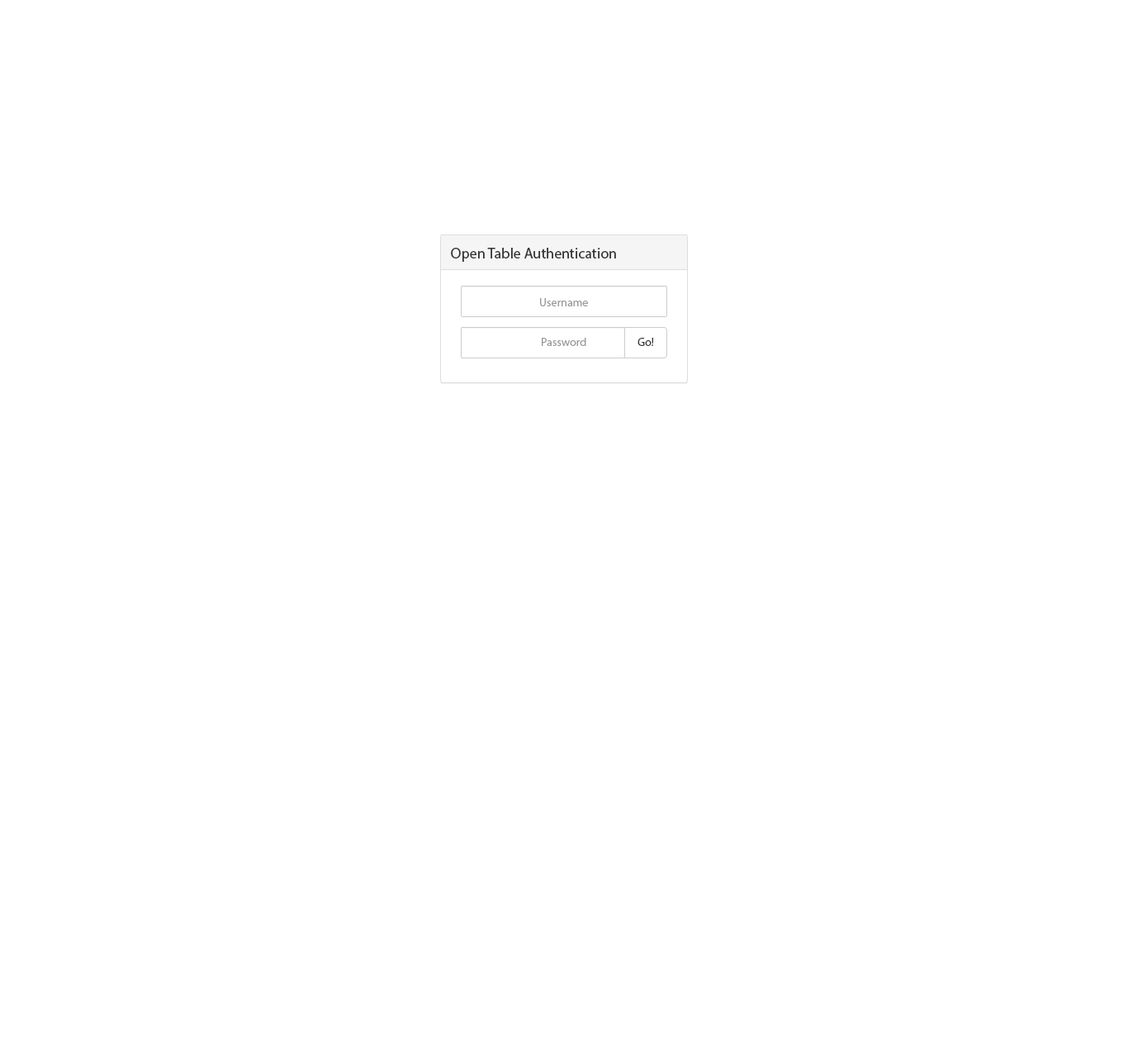
<style>
.page{position:relative;width:1128px;height:1057px;background:#ffffff}
.page>*{position:absolute;margin:0}
.t1{font:14.9px "MyriadPro-Regular";color:#333333}
.t2{font:11.6px "MyriadPro-Regular";color:#999999}
.t3{font:11.6px "MyriadPro-Regular";color:#333333}
</style>
<div class="page">
<p class="t1" style="left:451px;top:248px;width:165px;height:14px">Open Table Authentication</p>
<p class="t2" style="left:540px;top:298px;width:48px;height:8px">Username</p>
<p class="t2" style="left:542px;top:338px;width:44px;height:8px">Password</p>
<p class="t3" style="left:638px;top:338px;width:16px;height:8px">Go!</p>
</div>
